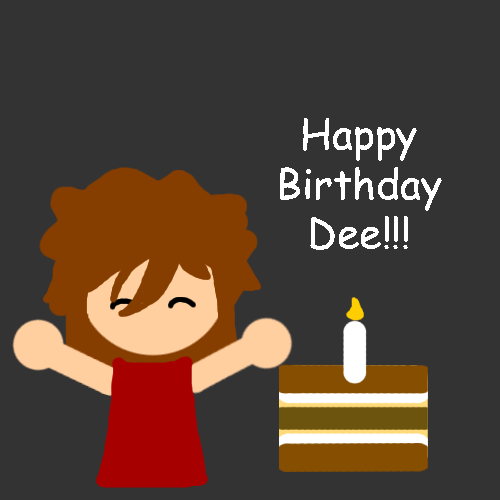
<style>
.page{position:relative;width:500px;height:500px;background:#333333}
.page>*{position:absolute;margin:0}
.t1{font:41px "ComicSansMS";color:#ffffff}
</style>
<div class="page">
<p class="t1" style="left:279px;top:117px;width:163px;height:133px;text-align:center">Happy<br>Birthday<br>Dee!!!</p>
</div>
